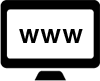
<style>
.page{position:relative;width:100px;height:81px;background:#ffffff}
.page>*{position:absolute;margin:0}
.t1{font:26.1px "Arial-BoldMT";letter-spacing:0.05em;color:#000000}
</style>
<div class="page">
<p class="t1" style="left:19px;top:29px;width:64px;height:14px">www</p>
</div>
